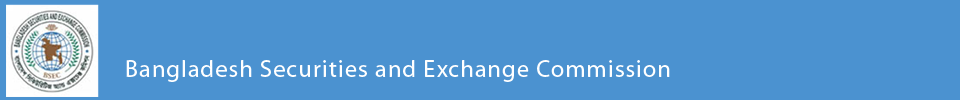
<style>
.page{position:relative;width:960px;height:100px;background:#4b92d0}
.page>*{position:absolute;margin:0}
.t1{font:24px "MyriadPro-Regular";letter-spacing:0.05em;color:#ffffff}
</style>
<div class="page">
<p class="t1" style="left:126px;top:60px;width:544px;height:22px">Bangladesh Securities and Exchange Commission</p>
</div>
